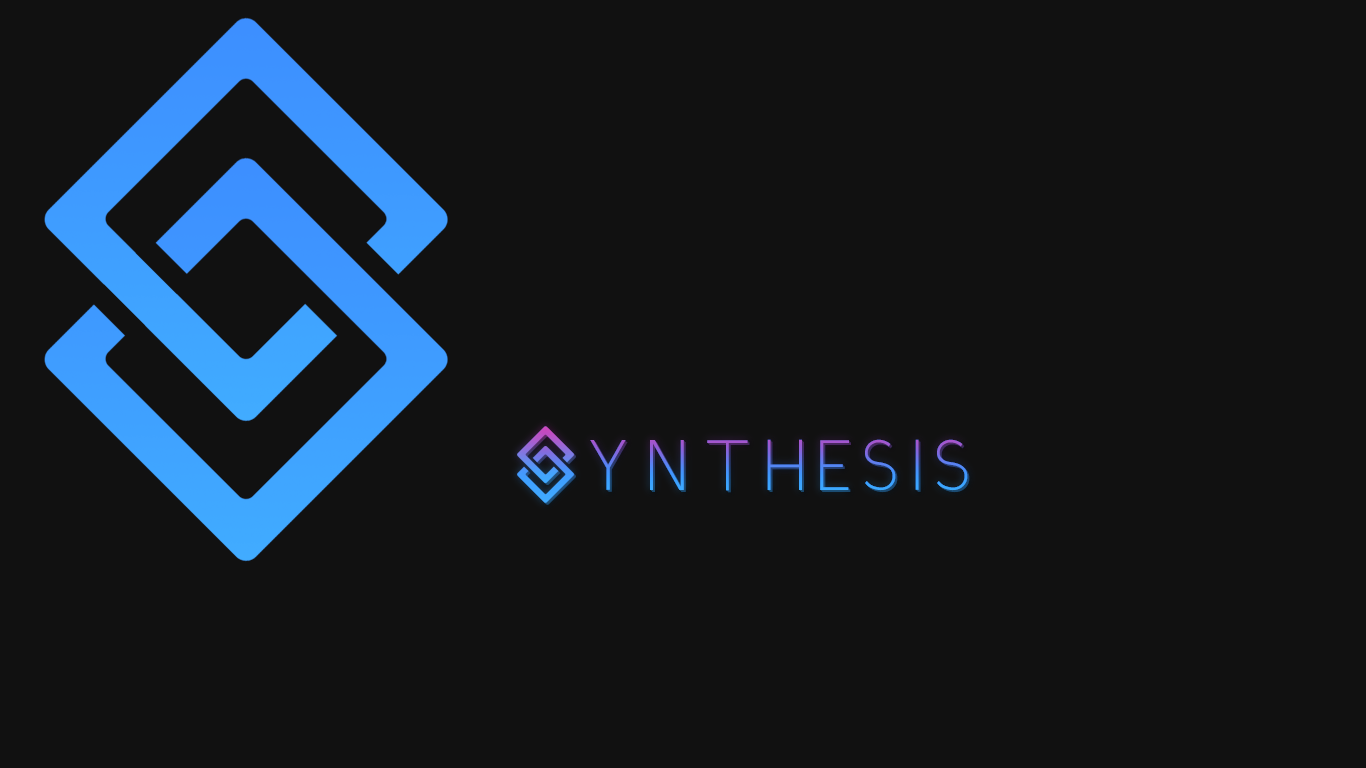
<style>
.page{position:relative;width:1366px;height:768px;background:#111111}
.page>*{position:absolute;margin:0}
.t1{font:72px "Alcubierre";letter-spacing:0.2em}
</style>
<div class="page">
<p class="t1" style="left:590px;top:439px;width:378px;height:52px">YNTHESIS</p>
</div>
